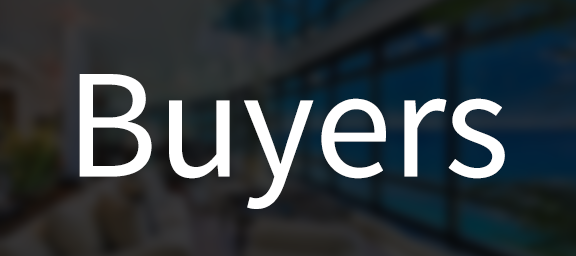
<style>
.page{position:relative;width:576px;height:256px}
.page>*{position:absolute;margin:0}
.t1{font:156px "SourceSansPro-Regular";color:#ffffff}
</style>
<div class="page">
<p class="t1" style="left:79px;top:74px;width:426px;height:135px">Buyers</p>
</div>
